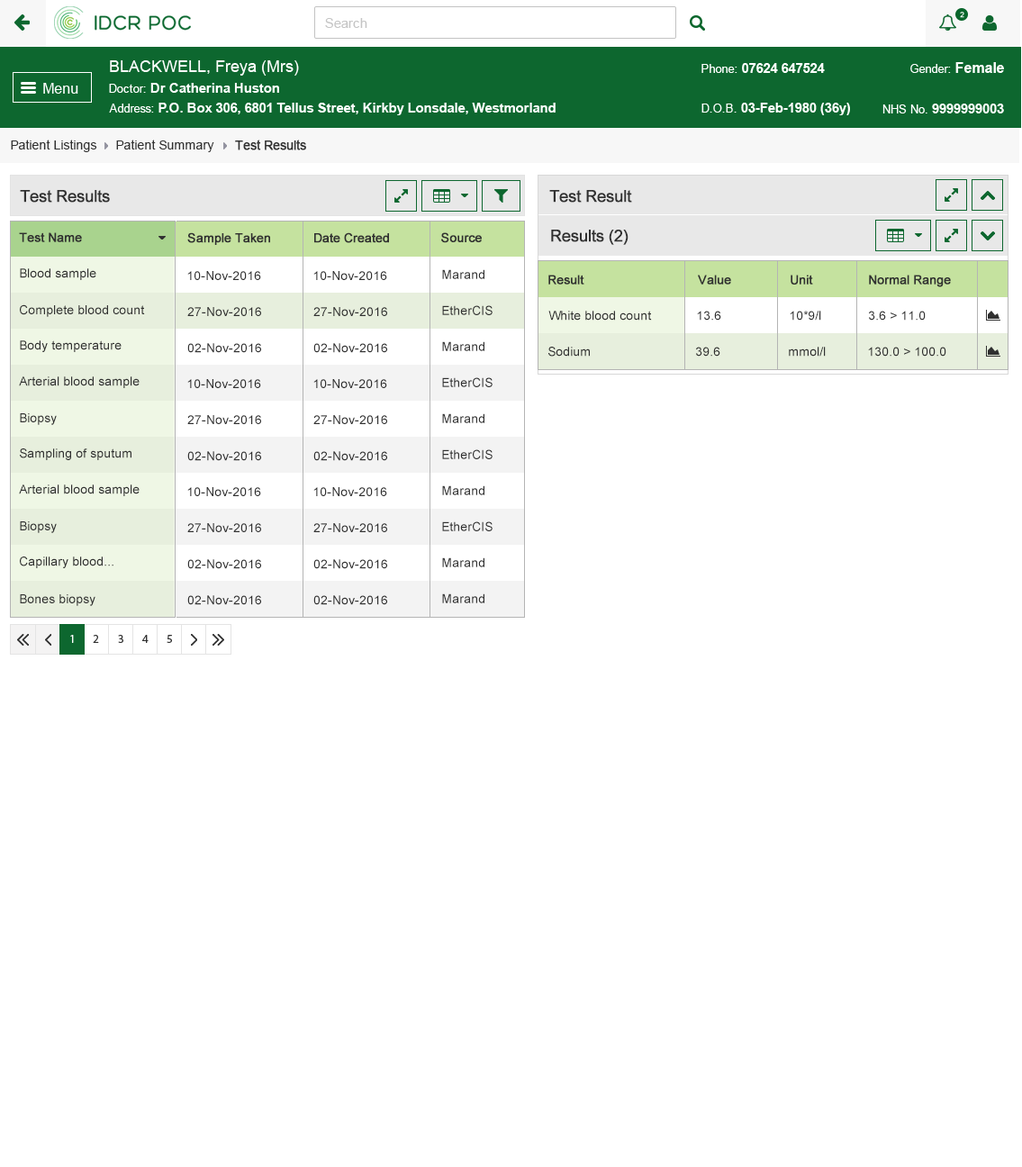
<style>
.page{position:relative;width:1022px;height:1167px;background:#ffffff}
.page>*{position:absolute;margin:0}
.t1{font:12.6px "ArialMT";color:#313131}
.t2{font:12.6px "ArialMT";color:#313131;font-weight:bold}
.t3{font:16.2px "ArialMT";color:#303030;font-weight:bold}
.t4{font:12.6px "ArialMT";color:#303030;font-weight:bold}
.t5{font:12.6px "ArialMT";color:#303030}
</style>
<div class="page">
<p class="t1" style="left:11px;top:140px;width:86px;height:12px">Patient Listings</p>
<p class="t1" style="left:116px;top:140px;width:98px;height:12px">Patient Summary</p>
<p class="t2" style="left:235px;top:140px;width:71px;height:10px">Test Results</p>
<p class="t3" style="left:20px;top:190px;width:90px;height:13px">Test Results</p>
<p class="t3" style="left:549px;top:190px;width:83px;height:13px">Test Result</p>
<p class="t4" style="left:19px;top:232px;width:63px;height:10px">Test Name</p>
<p class="t4" style="left:187px;top:232px;width:83px;height:13px">Sample Taken</p>
<p class="t4" style="left:314px;top:232px;width:75px;height:11px">Date Created</p>
<p class="t4" style="left:441px;top:232px;width:41px;height:11px">Source</p>
<p class="t3" style="left:551px;top:230px;width:77px;height:15px">Results (2)</p>
<p class="t5" style="left:20px;top:268px;width:76px;height:12px">Blood sample</p>
<p class="t5" style="left:442px;top:269px;width:42px;height:10px">Marand</p>
<p class="t5" style="left:187px;top:271px;width:74px;height:9px">10-Nov-2016</p>
<p class="t5" style="left:313px;top:271px;width:74px;height:9px">10-Nov-2016</p>
<p class="t4" style="left:548px;top:275px;width:36px;height:10px">Result</p>
<p class="t4" style="left:698px;top:275px;width:33px;height:10px">Value</p>
<p class="t4" style="left:791px;top:275px;width:22px;height:10px">Unit</p>
<p class="t4" style="left:869px;top:275px;width:82px;height:12px">Normal Range</p>
<p class="t5" style="left:20px;top:304px;width:125px;height:13px">Complete blood count</p>
<p class="t5" style="left:442px;top:305px;width:50px;height:10px">EtherCIS</p>
<p class="t5" style="left:187px;top:307px;width:74px;height:9px">27-Nov-2016</p>
<p class="t5" style="left:313px;top:307px;width:74px;height:9px">27-Nov-2016</p>
<p class="t5" style="left:548px;top:311px;width:104px;height:10px">White blood count</p>
<p class="t5" style="left:697px;top:311px;width:24px;height:10px">13.6</p>
<p class="t5" style="left:790px;top:311px;width:31px;height:10px">10*9/l</p>
<p class="t5" style="left:869px;top:311px;width:57px;height:10px">3.6 &gt; 11.0</p>
<p class="t5" style="left:20px;top:340px;width:102px;height:12px">Body temperature</p>
<p class="t5" style="left:442px;top:341px;width:42px;height:10px">Marand</p>
<p class="t5" style="left:187px;top:343px;width:74px;height:10px">02-Nov-2016</p>
<p class="t5" style="left:313px;top:343px;width:74px;height:10px">02-Nov-2016</p>
<p class="t5" style="left:548px;top:347px;width:42px;height:10px">Sodium</p>
<p class="t5" style="left:696px;top:347px;width:24px;height:10px">39.6</p>
<p class="t5" style="left:789px;top:347px;width:37px;height:10px">mmol/l</p>
<p class="t5" style="left:868px;top:347px;width:78px;height:10px">130.0 &gt; 100.0</p>
<p class="t5" style="left:19px;top:376px;width:121px;height:12px">Arterial blood sample</p>
<p class="t5" style="left:442px;top:377px;width:50px;height:10px">EtherCIS</p>
<p class="t5" style="left:187px;top:379px;width:74px;height:9px">10-Nov-2016</p>
<p class="t5" style="left:313px;top:379px;width:74px;height:9px">10-Nov-2016</p>
<p class="t5" style="left:20px;top:413px;width:37px;height:12px">Biopsy</p>
<p class="t5" style="left:442px;top:413px;width:42px;height:10px">Marand</p>
<p class="t5" style="left:187px;top:415px;width:74px;height:9px">27-Nov-2016</p>
<p class="t5" style="left:313px;top:415px;width:74px;height:9px">27-Nov-2016</p>
<p class="t5" style="left:20px;top:448px;width:111px;height:12px">Sampling of sputum</p>
<p class="t5" style="left:442px;top:449px;width:50px;height:10px">EtherCIS</p>
<p class="t5" style="left:187px;top:451px;width:74px;height:10px">02-Nov-2016</p>
<p class="t5" style="left:313px;top:451px;width:74px;height:10px">02-Nov-2016</p>
<p class="t5" style="left:19px;top:484px;width:121px;height:12px">Arterial blood sample</p>
<p class="t5" style="left:442px;top:485px;width:42px;height:10px">Marand</p>
<p class="t5" style="left:187px;top:487px;width:74px;height:9px">10-Nov-2016</p>
<p class="t5" style="left:313px;top:487px;width:74px;height:9px">10-Nov-2016</p>
<p class="t5" style="left:20px;top:521px;width:37px;height:12px">Biopsy</p>
<p class="t5" style="left:442px;top:521px;width:50px;height:10px">EtherCIS</p>
<p class="t5" style="left:187px;top:523px;width:74px;height:9px">27-Nov-2016</p>
<p class="t5" style="left:313px;top:523px;width:74px;height:9px">27-Nov-2016</p>
<p class="t5" style="left:20px;top:556px;width:93px;height:12px">Capillary blood...</p>
<p class="t5" style="left:442px;top:557px;width:42px;height:10px">Marand</p>
<p class="t5" style="left:187px;top:559px;width:74px;height:10px">02-Nov-2016</p>
<p class="t5" style="left:313px;top:559px;width:74px;height:10px">02-Nov-2016</p>
<p class="t5" style="left:442px;top:593px;width:42px;height:10px">Marand</p>
<p class="t5" style="left:20px;top:594px;width:75px;height:12px">Bones biopsy</p>
<p class="t5" style="left:187px;top:595px;width:74px;height:10px">02-Nov-2016</p>
<p class="t5" style="left:313px;top:595px;width:74px;height:10px">02-Nov-2016</p>
</div>
